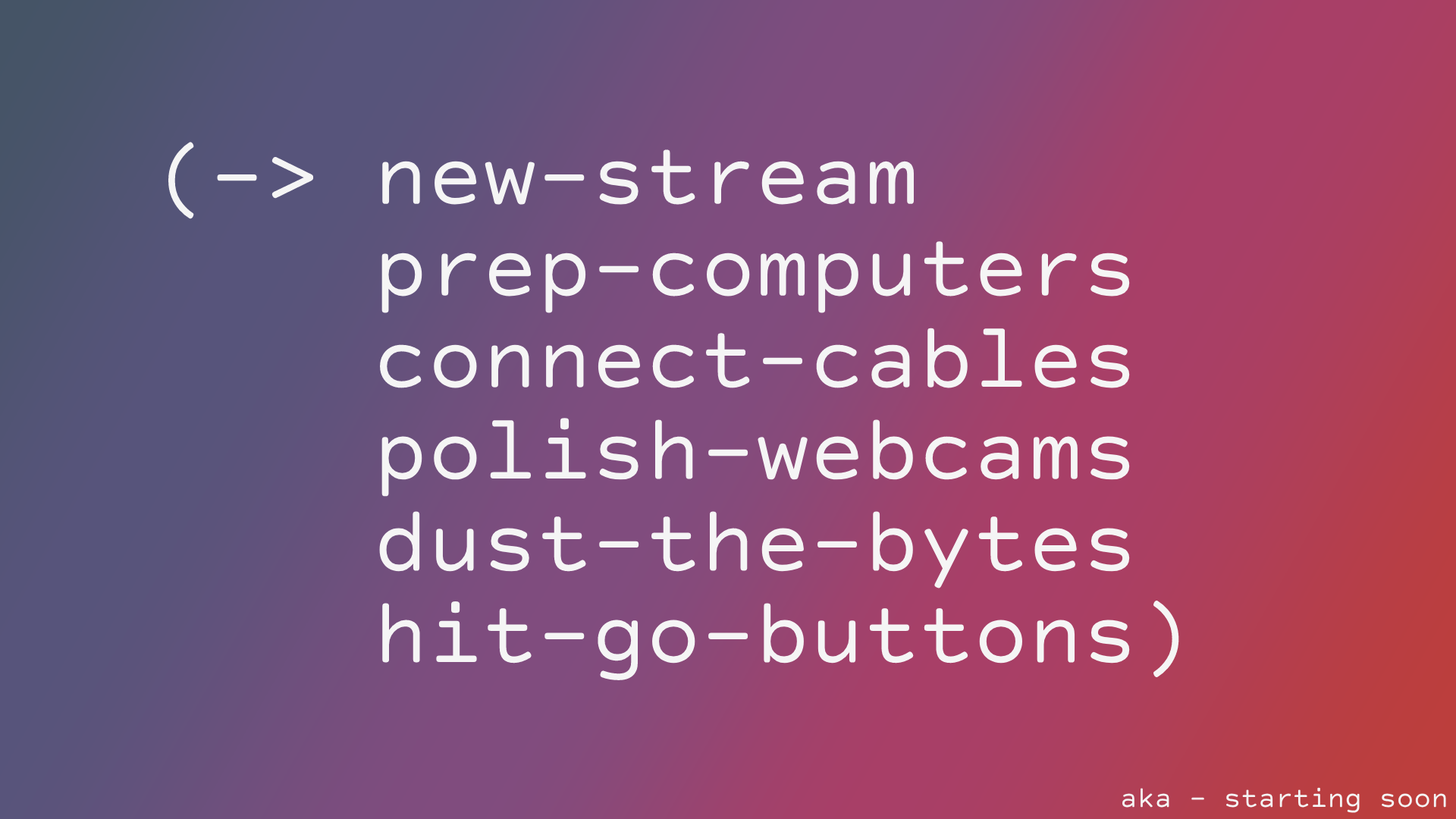
<style>
.page{position:relative;width:1456px;height:819px}
.page>*{position:absolute;margin:0}
.t1{font:91px "CourierPrimeCode-Regular";color:#f5f5f5}
.t2{font:28.8px "CourierPrimeCode-Regular";color:#f5f5f5}
</style>
<div class="page">
<p class="t1" style="left:168px;top:142px;width:1011px;height:538px">(-&gt; new-stream<br>    prep-computers<br>    connect-cables<br>    polish-webcams<br>    dust-the-bytes<br>    hit-go-buttons)</p>
<p class="t2" style="left:1122px;top:787px;width:324px;height:26px">aka - starting soon</p>
</div>
